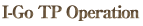
<style>
.page{position:relative;width:143px;height:26px;background:#ffffff}
.page>*{position:absolute;margin:0}
.t1{font:17px "RyuminPro-ExBold";letter-spacing:-0.08em;color:#69553d;font-weight:bold}
</style>
<div class="page">
<p class="t1" style="left:2px;top:5px;width:138px;height:16px">I-Go TP Operation</p>
</div>
